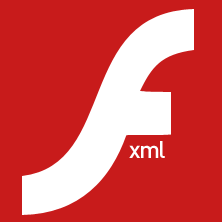
<style>
.page{position:relative;width:222px;height:222px;background:#c81b1b}
.page>*{position:absolute;margin:0}
.t1{font:23.7px "DIN-Medium";letter-spacing:-0.04em;color:#ffffff}
</style>
<div class="page">
<p class="t1" style="left:129px;top:141px;width:36px;height:17px">xml</p>
</div>
